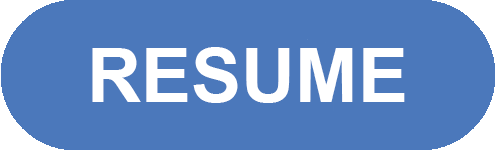
<style>
.page{position:relative;width:495px;height:150px;background:#4b78bb}
.page>*{position:absolute;margin:0}
.t1{font:75px "Arial-BoldMT";color:#ffffff}
</style>
<div class="page">
<p class="t1" style="left:92px;top:47px;width:313px;height:56px">RESUME</p>
</div>
